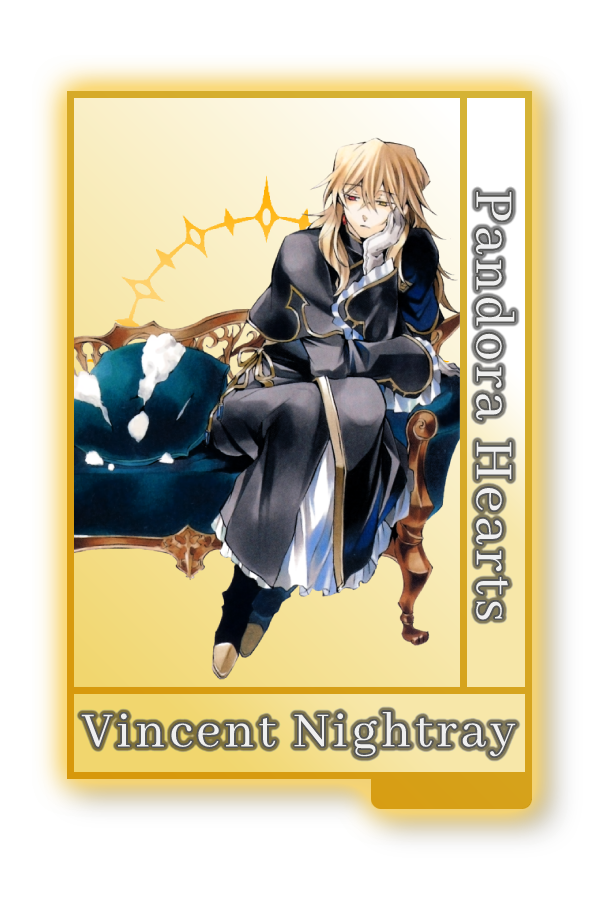
<style>
.page{position:relative;width:600px;height:900px;background:#ffffff}
.page>*{position:absolute;margin:0}
.t1{font:59.1px "AbhayaLibre-Regular";letter-spacing:0.072em;color:#efefef}
.t2{font:54px "AbhayaLibre-Regular";letter-spacing:0.072em;color:#efefef}
</style>
<div class="page">
<p class="t1" style="left:476px;top:192px;width:39px;height:428px;rotate:90deg">Pandora Hearts</p>
<p class="t2" style="left:81px;top:712px;width:435px;height:45px">Vincent Nightray</p>
</div>
